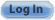
<style>
.page{position:relative;width:55px;height:20px}
.page>*{position:absolute;margin:0}
.t1{font:12.5px "MyriadPro-Bold";color:#2a3c54}
</style>
<div class="page">
<p class="t1" style="left:9px;top:4px;width:34px;height:12px">Log In</p>
</div>
